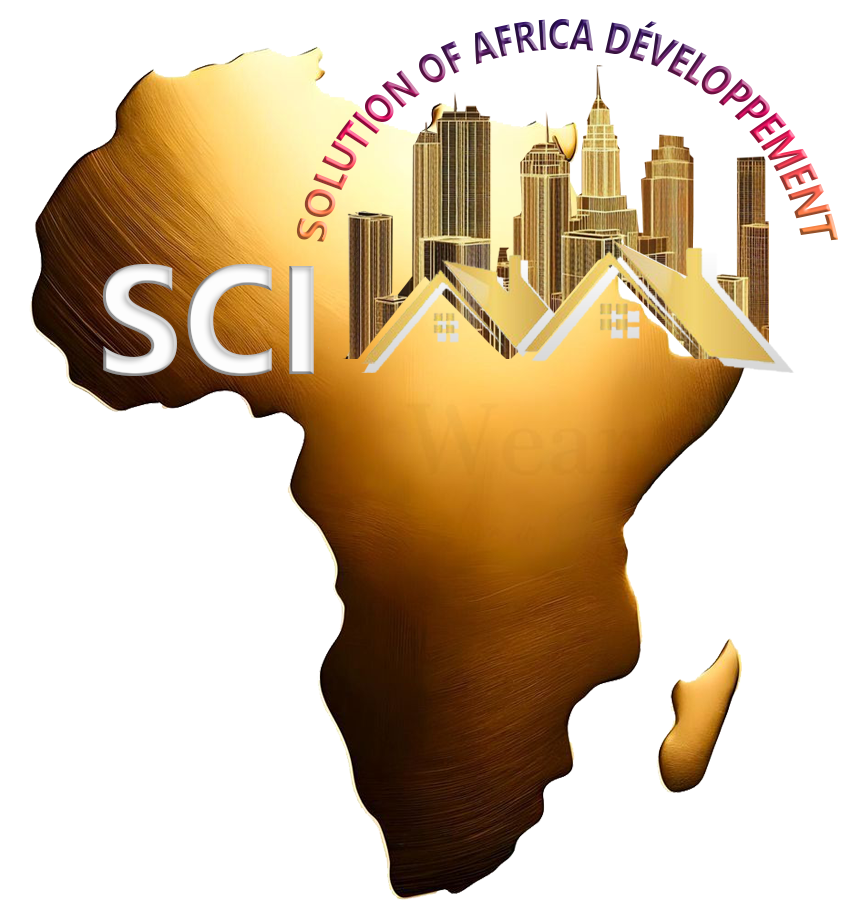
<style>
.page{position:relative;width:867px;height:924px;background:#ffffff}
.page>*{position:absolute;margin:0}
.t1{font:24.6px "SegoeUI-Bold"}
.t2{font:153.5px "SegoeUI-Bold"}
</style>
<div class="page">
<p class="t1" style="left:296px;top:18px;width:543px;height:224px">SOLUTION OF AFRICA DÉVELOPPEMENT</p>
<p class="t2" style="left:102px;top:264px;width:212px;height:112px">SCI</p>
</div>
